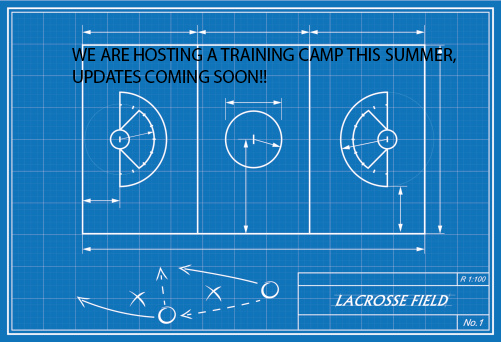
<style>
.page{position:relative;width:501px;height:342px}
.page>*{position:absolute;margin:0}
.t1{font:18px "MyriadPro-Regular";color:#000000}
</style>
<div class="page">
<p class="t1" style="left:72px;top:48px;width:384px;height:35px">WE ARE HOSTING A TRAINING CAMP THIS SUMMER,<br>UPDATES COMING SOON!!</p>
</div>
